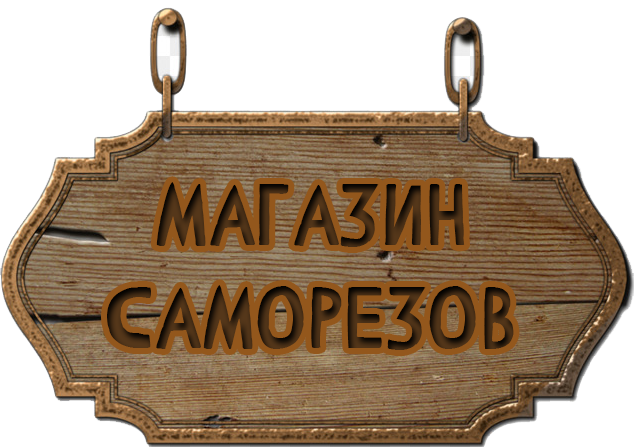
<style>
.page{position:relative;width:634px;height:447px;background:#ffffff}
.page>*{position:absolute;margin:0}
.t1{font:86px "ComicCAT"}
</style>
<div class="page">
<p class="t1" style="left:107px;top:182px;width:407px;height:168px;text-align:center">МАГАЗИН <br>САМОРЕЗОВ</p>
</div>
